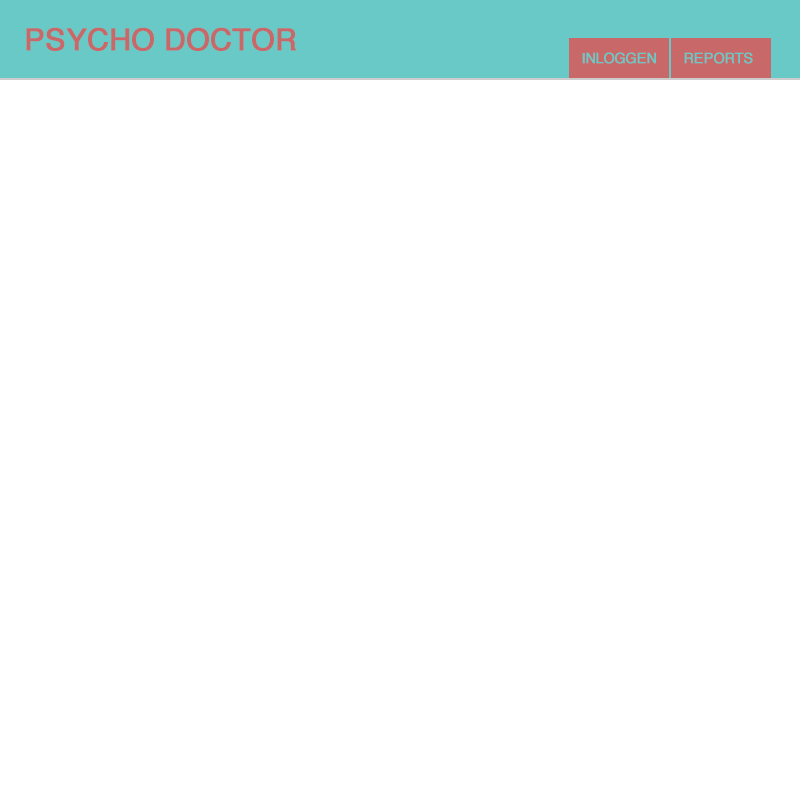
<style>
.page{position:relative;width:800px;height:800px;background:#ffffff}
.page>*{position:absolute;margin:0}
.t1{font:30px "Helvetica";color:#c96868;font-weight:bold}
.t2{font:14px "Helvetica";color:#68c9c6;font-weight:bold}
</style>
<div class="page">
<p class="t1" style="left:26px;top:27px;width:270px;height:24px">PSYCHO DOCTOR</p>
<p class="t2" style="left:582px;top:52px;width:74px;height:12px">INLOGGEN</p>
<p class="t2" style="left:684px;top:52px;width:69px;height:12px">REPORTS</p>
</div>
